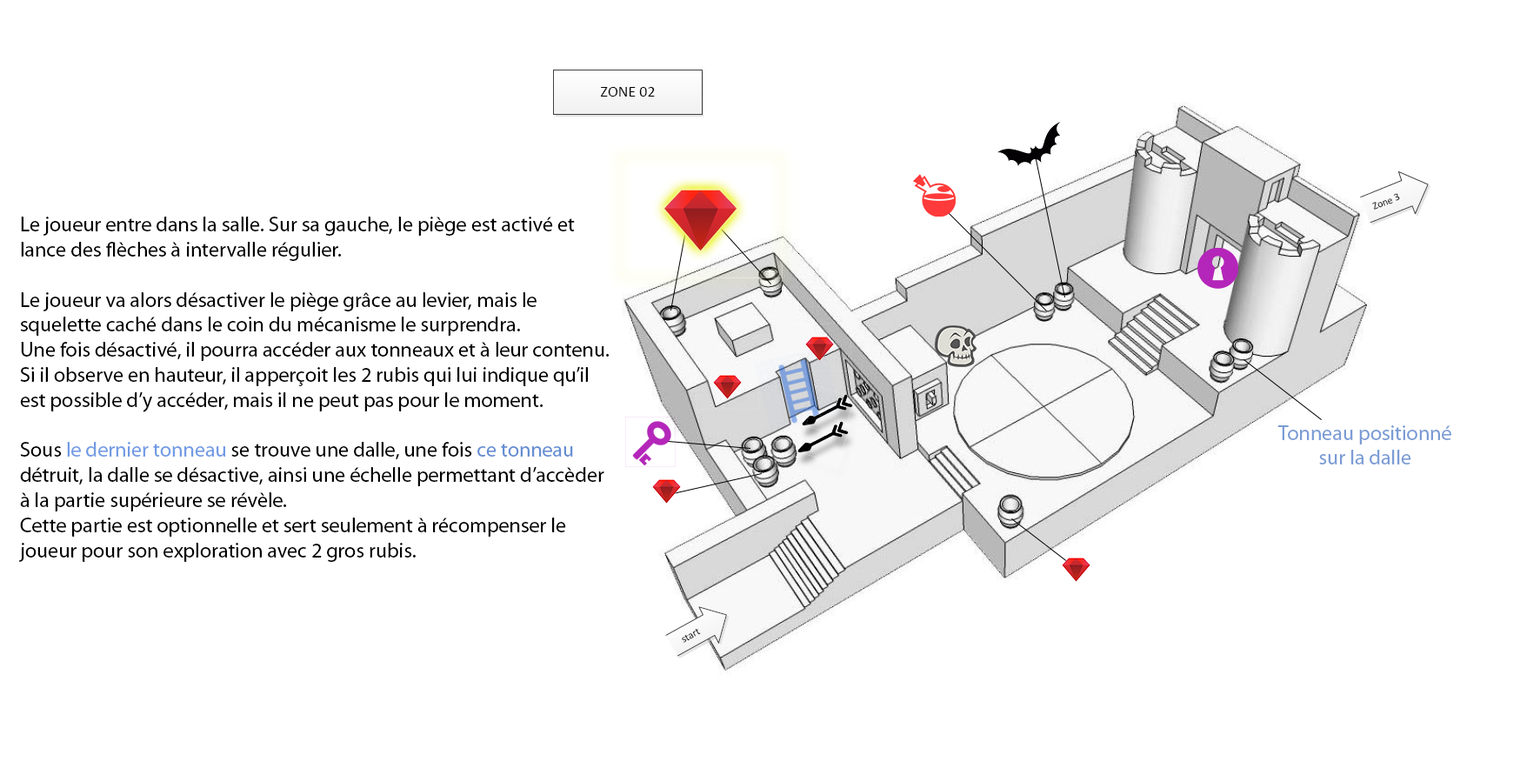
<style>
.page{position:relative;width:1540px;height:775px;background:#ffffff}
.page>*{position:absolute;margin:0}
.t1{font:20.9px "MyriadPro-Regular";color:#000000}
.t2{font:20.9px "MyriadPro-Regular";color:#729be4}
.t3{font:20.9px "MyriadPro-Regular";color:#668ed2}
.t4{font:20.9px "MyriadPro-Regular";color:#7b9cd5}
</style>
<div class="page">
<p class="t1" style="left:19px;top:216px;width:590px;height:346px">Le joueur entre dans la salle. Sur sa gauche, le piège est activé et lance des flèches à intervalle régulier. <br><br>Le joueur va alors désactiver le piège grâce au levier, mais le squelette caché dans le coin du mécanisme le surprendra.<br>Une fois désactivé, il pourra accéder aux tonneaux et à leur contenu.<br>Si il observe en hauteur, il apperçoit les 2 rubis qui lui indique qu’il est possible d’y accéder, mais il ne peut pas pour le moment.<br><br>Sous <span class="t2">le dernier tonneau</span> se trouve une dalle, une fois <span class="t3">ce tonneau </span>détruit, la dalle se désactive, ainsi une échelle permettant d’accèder à la partie supérieure se révèle.<br>Cette partie est optionnelle et sert seulement à récompenser le joueur pour son exploration avec 2 gros rubis.</p>
<p class="t4" style="left:1277px;top:425px;width:174px;height:39px;text-align:center">Tonneau positionné sur la dalle</p>
</div>
